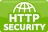
<style>
.page{position:relative;width:48px;height:32px;background:#70b500}
.page>*{position:absolute;margin:0}
.t1{font:11.2px "Ubuntu-Bold";color:#ffffff;scale:1.05 1}
.t2{font:8.4px "Ubuntu-Bold";color:#ffffff;scale:1.03 1}
</style>
<div class="page">
<p class="t1" style="left:9px;top:14px;width:31px;height:9px">HTTP</p>
<p class="t2" style="left:3px;top:23px;width:43px;height:8px">SECURITY</p>
</div>
